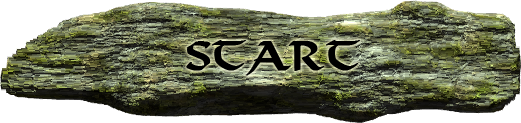
<style>
.page{position:relative;width:521px;height:123px;background:#ffffff}
.page>*{position:absolute;margin:0}
.t1{font:38px "Viking-Medium";color:#000000;font-weight:bold}
</style>
<div class="page">
<p class="t1" style="left:186px;top:40px;width:174px;height:36px">start</p>
</div>
